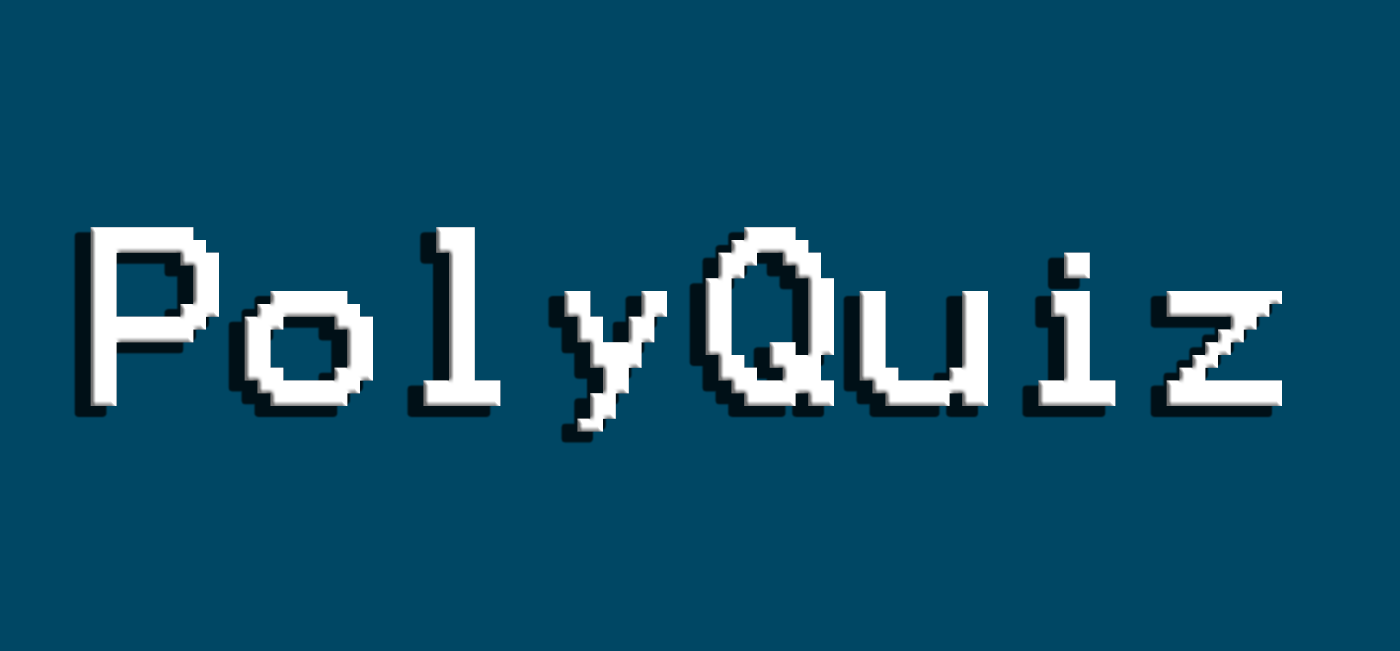
<style>
.page{position:relative;width:1400px;height:651px;background:#004764}
.page>*{position:absolute;margin:0}
.t1{font:204.2px "Terminal";color:#ffffff}
</style>
<div class="page">
<p class="t1" style="left:90px;top:227px;width:1192px;height:205px">PolyQuiz</p>
</div>
